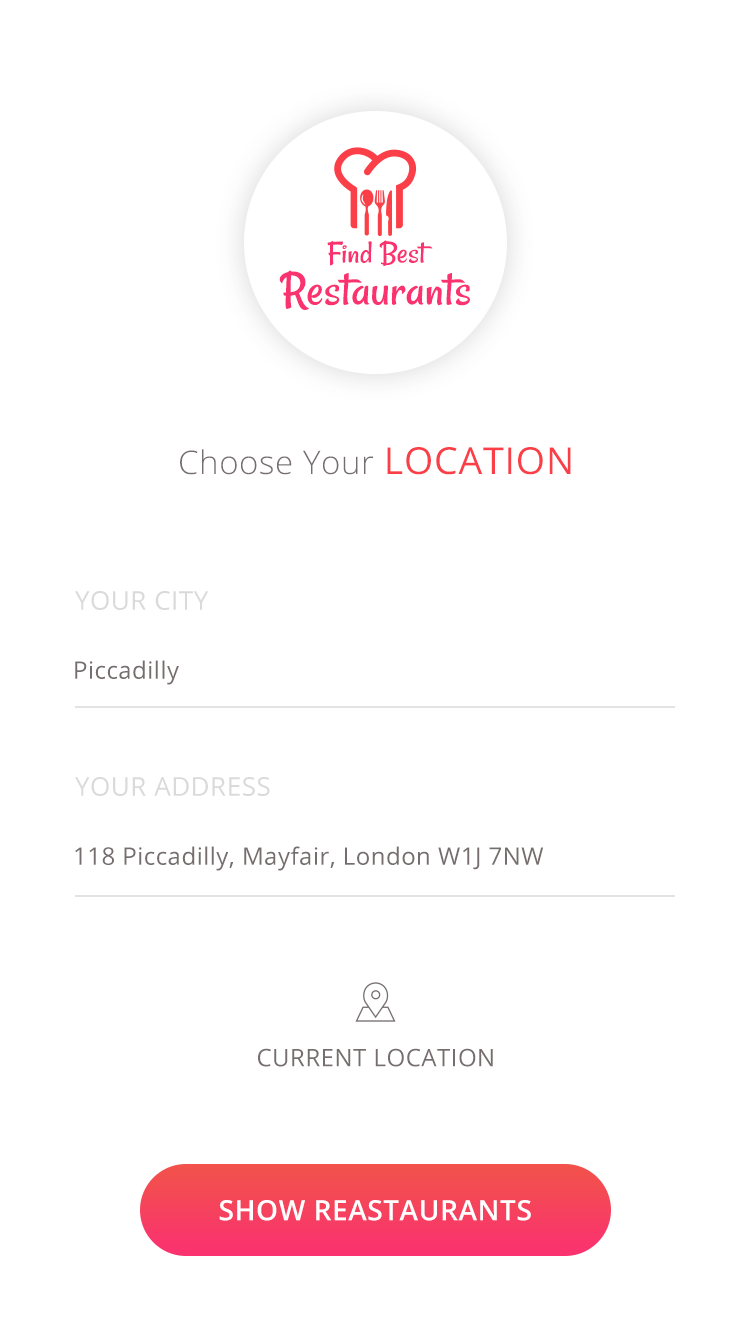
<style>
.page{position:relative;width:750px;height:1336px;background:#ffffff}
.page>*{position:absolute;margin:0}
.t1{font:49.4px/42px "Rancho";color:#fa326f;scale:1.07 1}
.t2{font:32.1px/42px "Rancho";color:#fa326f;scale:1.07 1}
.t3{font:32.6px "OpenSans-Light";letter-spacing:0.02em;color:#766e6e}
.t4{font:37.2px "OpenSans";letter-spacing:0.02em;color:#fa3f48;text-transform:uppercase}
.t5{font:26px "OpenSans";letter-spacing:0.02em;color:#dbdada;text-transform:uppercase}
.t6{font:24px "OpenSans";letter-spacing:0.02em;color:#766e6e}
.t7{font:24px "OpenSans";letter-spacing:0.02em;color:#766e6e;text-transform:uppercase}
.t8{font:28px "OpenSans-Semibold";letter-spacing:0.02em;color:#ffffff;text-transform:uppercase}
</style>
<div class="page">
<p class="t1" style="left:279px;top:240px;width:191px;height:70px;text-align:center"><span class="t2">Find Best<br></span>Restaurants</p>
<p class="t3" style="left:180px;top:447px;width:391px;height:28px">Choose Your <span class="t4">location</span></p>
<p class="t5" style="left:75px;top:591px;width:134px;height:19px">Your city</p>
<p class="t6" style="left:75px;top:660px;width:104px;height:25px">Piccadilly</p>
<p class="t5" style="left:75px;top:777px;width:195px;height:19px">Your address</p>
<p class="t6" style="left:75px;top:846px;width:469px;height:25px">118 Piccadilly, Mayfair, London W1J 7NW</p>
<p class="t7" style="left:258px;top:1048px;width:235px;height:19px">CURRENT LOCATION</p>
<p class="t8" style="left:219px;top:1200px;width:312px;height:21px">Show Reastaurants</p>
</div>
